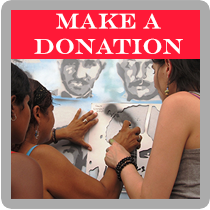
<style>
.page{position:relative;width:210px;height:210px}
.page>*{position:absolute;margin:0}
.t1{font:21px "EngraversMT";color:#ffffff}
</style>
<div class="page">
<p class="t1" style="left:34px;top:13px;width:149px;height:41px;text-align:center">Make a <br>donation</p>
</div>
